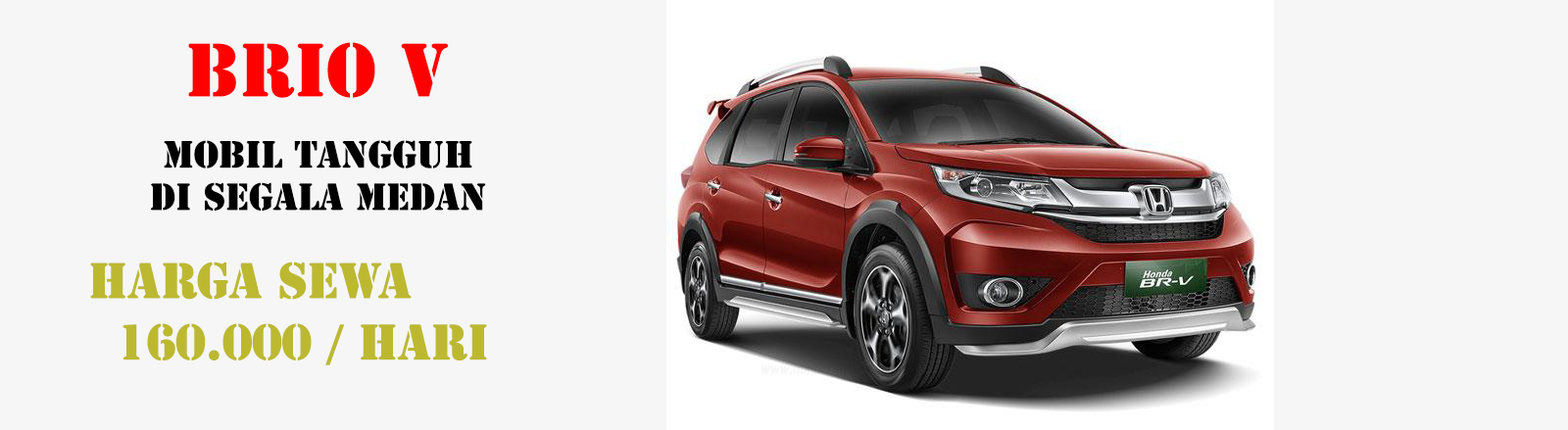
<style>
.page{position:relative;width:1568px;height:430px;background:#f6f6f6}
.page>*{position:absolute;margin:0}
.t1{font:70.6px "StencilStd";color:#ff0000}
.t2{font:35.3px "StencilStd";color:#000000}
.t3{font:47px "StencilStd";color:#bcb931}
</style>
<div class="page">
<p class="t1" style="left:188px;top:42px;width:260px;height:56px">BRIO V</p>
<p class="t2" style="left:151px;top:140px;width:335px;height:71px;text-align:center">MOBIL tangguh<br>di segala medan</p>
<p class="t3" style="left:90px;top:262px;width:322px;height:38px">HARGA SEWA</p>
<p class="t3" style="left:122px;top:323px;width:365px;height:43px">160.000 / hari</p>
</div>
